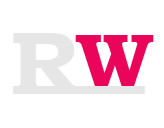
<style>
.page{position:relative;width:164px;height:128px;background:#ffffff}
.page>*{position:absolute;margin:0}
.t1{font:89.7px "BookmanOldStyle-Bold";letter-spacing:0.025em;color:#e6e6e6}
.t2{font:74.9px "BookmanOldStyle-Bold";letter-spacing:0.025em;color:#eb055a;scale:1.12 1}
</style>
<div class="page">
<p class="t1" style="left:13px;top:33px;width:68px;height:61px">R</p>
<p class="t2" style="left:75px;top:35px;width:79px;height:51px">W</p>
</div>
